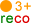
<style>
.page{position:relative;width:36px;height:24px;background:#ffffff}
.page>*{position:absolute;margin:0}
.t1{font:14px "ArialMT";letter-spacing:0.05em;color:#ff9900}
.t2{font:14px "ArialMT";letter-spacing:0.05em;color:#008000}
.t3{font:14px "ArialMT";letter-spacing:0.05em;color:#dd0000}
</style>
<div class="page">
<p class="t1" style="left:15px;top:1px;width:16px;height:10px">3+</p>
<p class="t2" style="left:1px;top:15px;width:29px;height:8px">re<span class="t3">co</span></p>
</div>
